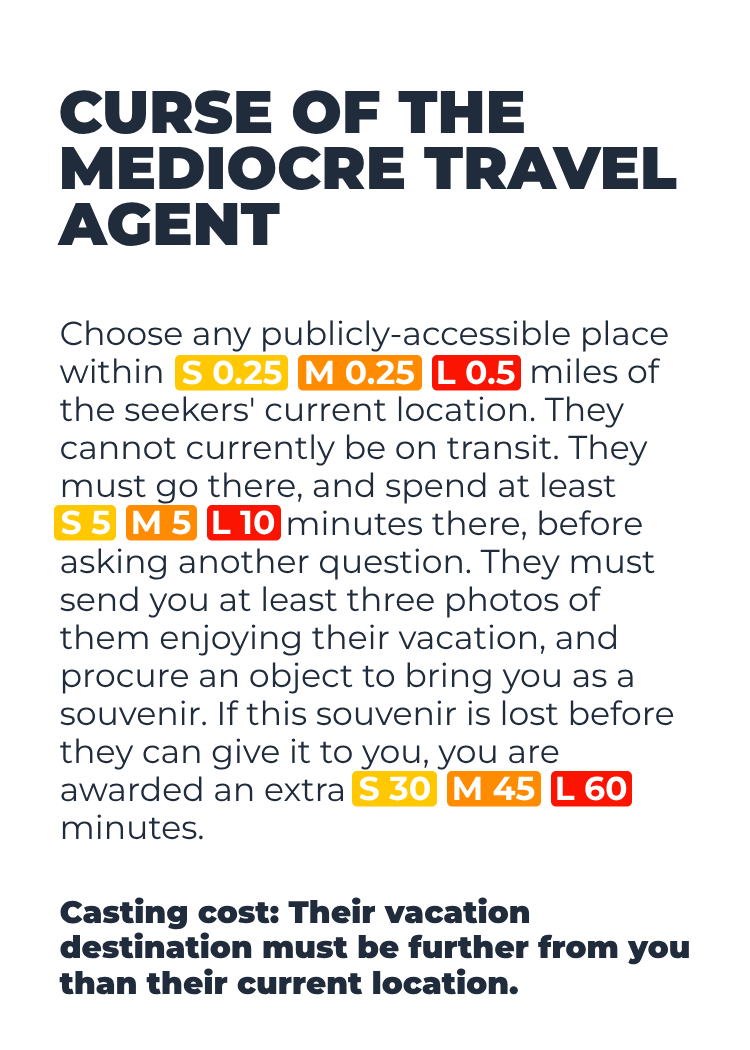
<style>
.page{position:relative;width:750px;height:1050px;background:#ffffff}
.page>*{position:absolute;margin:0}
.t1{font:59.8px/56.4px "Montserrat-Black";color:#202c3c}
.t2{font:33.1px/38px "Montserrat-Regular";color:#202c3c}
.t3{font:33.1px "Montserrat-Bold";color:#ffffff}
.t4{font:31.1px/35.6px "Montserrat-Black";color:#202c3c}
</style>
<div class="page">
<p class="t1" style="left:57px;top:90px;width:620px;height:156px">CURSE OF THE<br>MEDIOCRE TRAVEL<br>AGENT</p>
<p class="t2" style="left:59px;top:320px;width:615px;height:520px">Choose any publicly-accessible place<br>within                                          miles of<br>the seekers' current location. They<br>cannot currently be on transit. They<br>must go there, and spend at least<br>                          minutes there, before<br>asking another question. They must<br>send you at least three photos of<br>them enjoying their vacation, and<br>procure an object to bring you as a<br>souvenir. If this souvenir is lost before<br>they can give it to you, you are<br>awarded an extra<br>minutes.</p>
<p class="t3" style="left:182px;top:360px;width:100px;height:25px">S 0.25</p>
<p class="t3" style="left:306px;top:360px;width:109px;height:25px">M 0.25</p>
<p class="t3" style="left:438px;top:360px;width:77px;height:25px">L 0.5</p>
<p class="t3" style="left:61px;top:510px;width:49px;height:25px">S 5</p>
<p class="t3" style="left:133px;top:510px;width:58px;height:25px">M 5</p>
<p class="t3" style="left:213px;top:510px;width:62px;height:25px">L 10</p>
<p class="t3" style="left:359px;top:776px;width:71px;height:25px">S 30</p>
<p class="t3" style="left:454px;top:776px;width:81px;height:25px">M 45</p>
<p class="t3" style="left:557px;top:776px;width:70px;height:25px">L 60</p>
<p class="t4" style="left:59px;top:897px;width:630px;height:98px">Casting cost: Their vacation<br>destination must be further from you<br>than their current location.</p>
</div>
